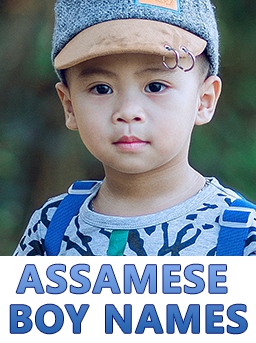
<style>
.page{position:relative;width:256px;height:343px}
.page>*{position:absolute;margin:0}
.t1{font:38.8px/40px "NirmalaUI-Bold";letter-spacing:0.02em;text-transform:uppercase;font-weight:bold}
</style>
<div class="page">
<p class="t1" style="left:10px;top:264px;width:237px;height:70px;text-align:center">Assamese <br>Boy Names</p>
</div>
